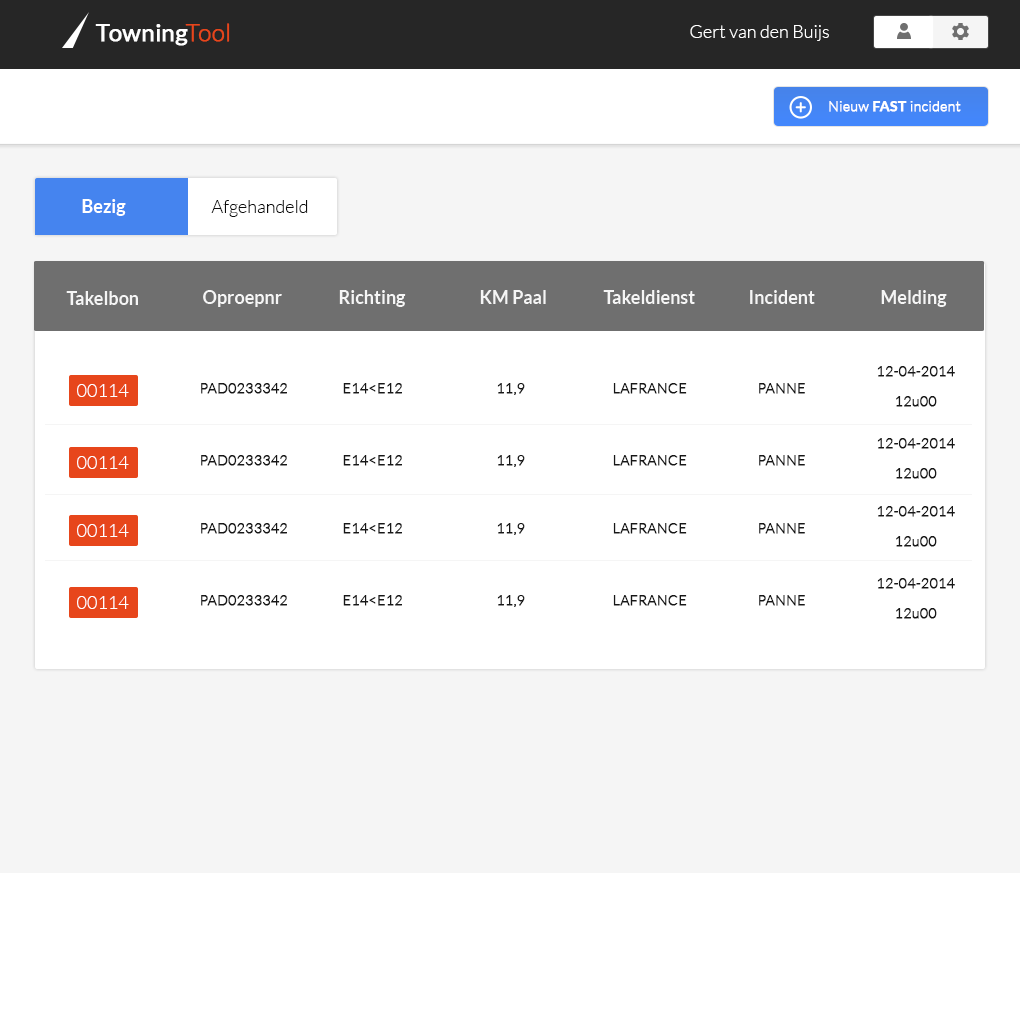
<style>
.page{position:relative;width:1020px;height:1020px;background:#ffffff}
.page>*{position:absolute;margin:0}
.t1{font:24px "Lato-Regular";letter-spacing:0.005em;color:#ffffff;font-weight:bold}
.t2{font:24px "Lato-Light";letter-spacing:0.005em;color:#e7461b;font-weight:bold}
.t3{font:18px "Lato-Light";color:#ffffff}
.t4{font:14px "Lato-Light";letter-spacing:0.005em;color:#ffffff;font-weight:bold}
.t5{font:14px "Lato-Bold";letter-spacing:0.005em;color:#ffffff;font-weight:bold}
.t6{font:18px "Lato-Bold";color:#ffffff}
.t7{font:18px "Lato-Light";color:#0c0c0c}
.t8{font:14px/30px "Lato-Light";letter-spacing:0.005em;color:#171717;font-weight:bold}
.t9{font:14px "Lato-Light";letter-spacing:0.005em;color:#171717;font-weight:bold}
</style>
<div class="page">
<p class="t1" style="left:95px;top:23px;width:135px;height:23px">Towning<span class="t2">Tool</span></p>
<p class="t3" style="left:690px;top:25px;width:139px;height:16px">Gert van den Buijs</p>
<p class="t4" style="left:829px;top:101px;width:132px;height:11px">Nieuw <span class="t5">FAST </span>incident</p>
<p class="t6" style="left:82px;top:199px;width:44px;height:17px">Bezig</p>
<p class="t7" style="left:211px;top:200px;width:97px;height:17px">Afgehandeld</p>
<p class="t8" style="left:877px;top:366px;width:78px;height:41px;text-align:center">12-04-2014  <br>12u00</p>
<p class="t3" style="left:77px;top:384px;width:52px;height:13px">00114</p>
<p class="t9" style="left:201px;top:383px;width:86px;height:11px">PAD0233342</p>
<p class="t9" style="left:343px;top:383px;width:59px;height:11px">E14&lt;E12</p>
<p class="t9" style="left:497px;top:383px;width:28px;height:12px">11,9</p>
<p class="t9" style="left:613px;top:383px;width:74px;height:11px">LAFRANCE</p>
<p class="t9" style="left:759px;top:383px;width:46px;height:11px">PANNE</p>
<p class="t8" style="left:877px;top:438px;width:78px;height:41px;text-align:center">12-04-2014  <br>12u00</p>
<p class="t3" style="left:77px;top:456px;width:52px;height:13px">00114</p>
<p class="t9" style="left:201px;top:455px;width:86px;height:11px">PAD0233342</p>
<p class="t9" style="left:343px;top:455px;width:59px;height:11px">E14&lt;E12</p>
<p class="t9" style="left:497px;top:455px;width:28px;height:12px">11,9</p>
<p class="t9" style="left:613px;top:455px;width:74px;height:11px">LAFRANCE</p>
<p class="t9" style="left:759px;top:455px;width:46px;height:11px">PANNE</p>
<p class="t8" style="left:877px;top:506px;width:78px;height:41px;text-align:center">12-04-2014  <br>12u00</p>
<p class="t3" style="left:77px;top:524px;width:52px;height:13px">00114</p>
<p class="t9" style="left:201px;top:523px;width:86px;height:11px">PAD0233342</p>
<p class="t9" style="left:343px;top:523px;width:59px;height:11px">E14&lt;E12</p>
<p class="t9" style="left:497px;top:523px;width:28px;height:12px">11,9</p>
<p class="t9" style="left:613px;top:523px;width:74px;height:11px">LAFRANCE</p>
<p class="t9" style="left:759px;top:523px;width:46px;height:11px">PANNE</p>
<p class="t8" style="left:877px;top:578px;width:78px;height:41px;text-align:center">12-04-2014  <br>12u00</p>
<p class="t3" style="left:77px;top:596px;width:52px;height:13px">00114</p>
<p class="t9" style="left:201px;top:595px;width:86px;height:11px">PAD0233342</p>
<p class="t9" style="left:343px;top:595px;width:59px;height:11px">E14&lt;E12</p>
<p class="t9" style="left:497px;top:595px;width:28px;height:12px">11,9</p>
<p class="t9" style="left:613px;top:595px;width:74px;height:11px">LAFRANCE</p>
<p class="t9" style="left:759px;top:595px;width:46px;height:11px">PANNE</p>
</div>
